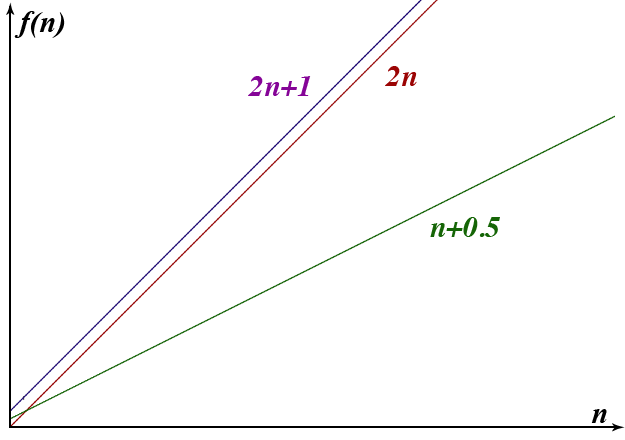
<style>
.page{position:relative;width:625px;height:440px;background:#ffffff}
.page>*{position:absolute;margin:0}
.t1{font:30px "TimesNewRomanPS-BoldItalicMT";color:#000000}
.t2{font:30px "Times-BoldItalic";color:#850497}
.t3{font:30px "Times-BoldItalic";color:#9b0404}
.t4{font:30px "Times-BoldItalic";color:#156506}
</style>
<div class="page">
<p class="t1" style="left:14px;top:11px;width:51px;height:27px">f(n)</p>
<p class="t2" style="left:248px;top:76px;width:63px;height:20px">2n+1</p>
<p class="t3" style="left:385px;top:66px;width:32px;height:20px">2n</p>
<p class="t4" style="left:430px;top:217px;width:70px;height:20px">n+0.5</p>
<p class="t1" style="left:591px;top:409px;width:16px;height:14px">n</p>
</div>
